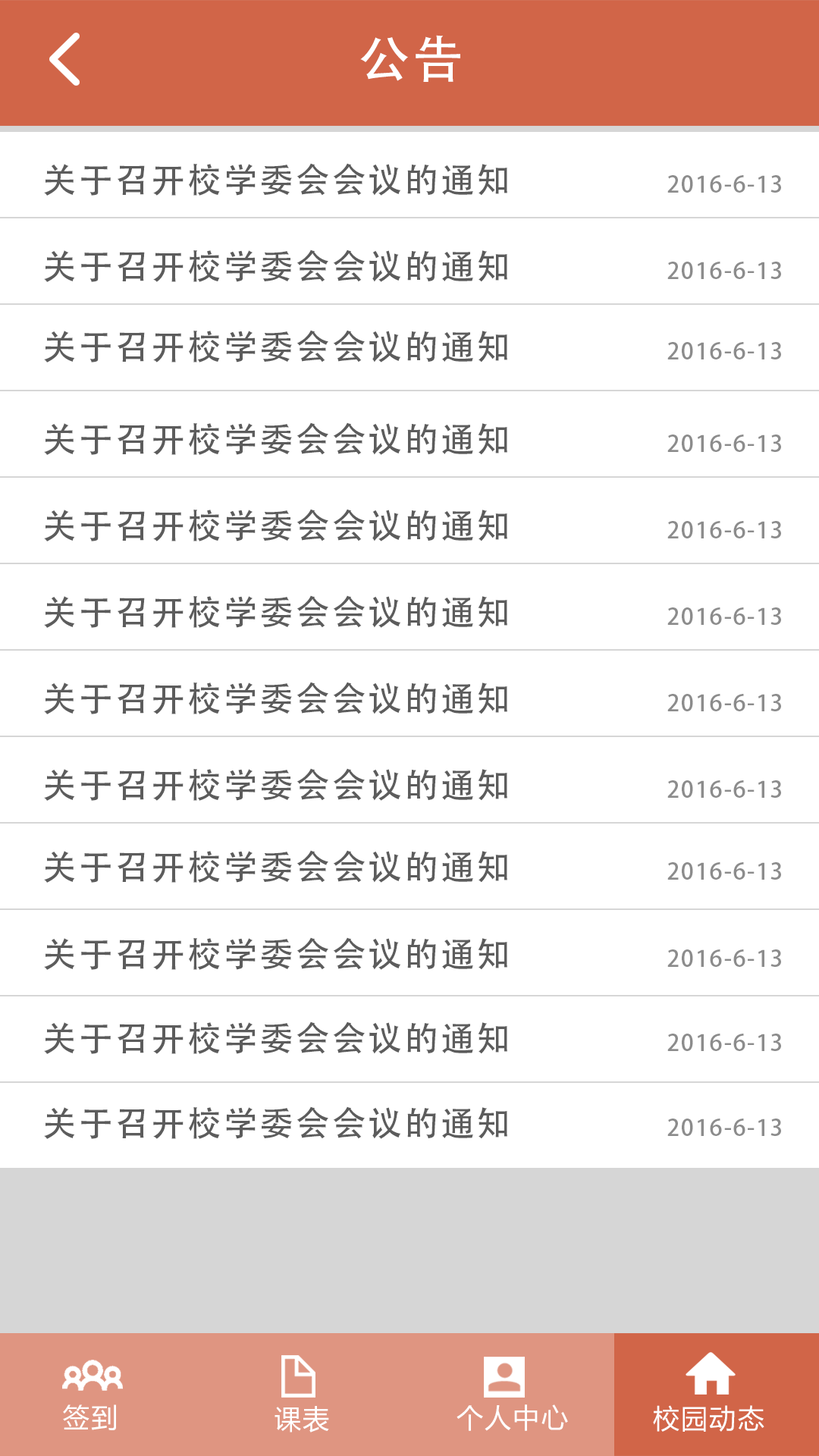
<style>
.page{position:relative;width:819px;height:1456px;background:#ffffff}
.page>*{position:absolute;margin:0}
.t1{font:50.8px "AdobeHeitiStd-Regular";letter-spacing:0.06em;color:#ffffff}
.t2{font:34.1px "AdobeHeitiStd-Regular";letter-spacing:0.06em;color:#5c5c5c}
.t3{font:22.7px "AdobeHeitiStd-Regular";letter-spacing:0.06em;color:#8c8c8c}
.t4{font:26.9px "MicrosoftYaHei";letter-spacing:0.06em;color:#ffffff}
</style>
<div class="page">
<p class="t1" style="left:360px;top:35px;width:100px;height:47px">公告</p>
<p class="t2" style="left:44px;top:163px;width:737px;height:33px">关于召开校学委会会议的通知                <span class="t3">2016-6-13</span></p>
<p class="t2" style="left:44px;top:249px;width:737px;height:33px">关于召开校学委会会议的通知                <span class="t3">2016-6-13</span></p>
<p class="t2" style="left:44px;top:330px;width:737px;height:32px">关于召开校学委会会议的通知                <span class="t3">2016-6-13</span></p>
<p class="t2" style="left:44px;top:422px;width:737px;height:33px">关于召开校学委会会议的通知                <span class="t3">2016-6-13</span></p>
<p class="t2" style="left:44px;top:509px;width:737px;height:32px">关于召开校学委会会议的通知                <span class="t3">2016-6-13</span></p>
<p class="t2" style="left:44px;top:595px;width:737px;height:33px">关于召开校学委会会议的通知                <span class="t3">2016-6-13</span></p>
<p class="t2" style="left:44px;top:682px;width:737px;height:32px">关于召开校学委会会议的通知                <span class="t3">2016-6-13</span></p>
<p class="t2" style="left:44px;top:768px;width:737px;height:33px">关于召开校学委会会议的通知                <span class="t3">2016-6-13</span></p>
<p class="t2" style="left:44px;top:850px;width:737px;height:33px">关于召开校学委会会议的通知                <span class="t3">2016-6-13</span></p>
<p class="t2" style="left:44px;top:937px;width:737px;height:33px">关于召开校学委会会议的通知                <span class="t3">2016-6-13</span></p>
<p class="t2" style="left:44px;top:1021px;width:737px;height:33px">关于召开校学委会会议的通知                <span class="t3">2016-6-13</span></p>
<p class="t2" style="left:44px;top:1106px;width:737px;height:33px">关于召开校学委会会议的通知                <span class="t3">2016-6-13</span></p>
<p class="t4" style="left:63px;top:1404px;width:53px;height:26px">签到</p>
<p class="t4" style="left:275px;top:1406px;width:54px;height:26px">课表</p>
<p class="t4" style="left:457px;top:1404px;width:111px;height:27px">个人中心</p>
<p class="t4" style="left:653px;top:1405px;width:111px;height:27px">校园动态</p>
</div>
